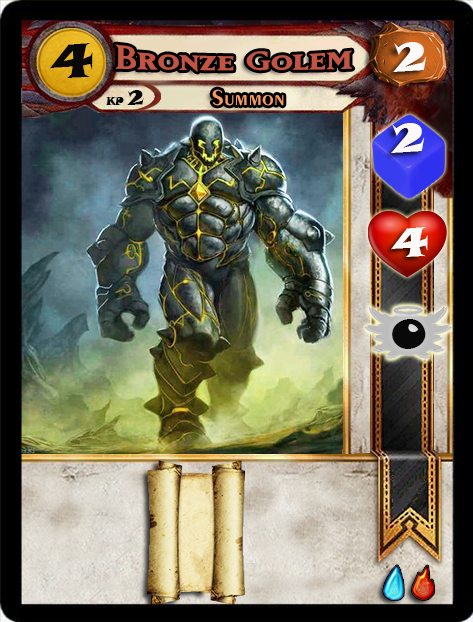
<style>
.page{position:relative;width:473px;height:622px}
.page>*{position:absolute;margin:0}
.t1{font:46.6px "SnapITC-Regular";color:#090909;scale:1.05 1}
.t2{font:40px "MatrixBoldSmallCaps";color:#c25443;scale:1.06 1}
.t3{font:40px "SnapITC-Regular";color:#fef9f9;scale:1.05 1}
.t4{font:22.7px "Exotic350BT-DemiBold";color:#f89c64;scale:1.06 1}
.t5{font:20.5px "SnapITC-Regular";color:#090909}
.t6{font:40px "SnapITC-Regular";color:#090909;scale:1.05 1}
</style>
<div class="page">
<p class="t1" style="left:50px;top:43px;width:43px;height:35px">4</p>
<p class="t2" style="left:115px;top:44px;width:238px;height:28px">Bronze Golem</p>
<p class="t3" style="left:393px;top:42px;width:34px;height:30px">2</p>
<p class="t4" style="left:212px;top:89px;width:72px;height:17px">Summon</p>
<p class="t5" style="left:127px;top:90px;width:17px;height:15px">2</p>
<p class="t3" style="left:391px;top:123px;width:34px;height:30px">2</p>
<p class="t3" style="left:391px;top:227px;width:37px;height:30px">4</p>
<p class="t6" style="left:392px;top:319px;width:34px;height:30px">0</p>
</div>
